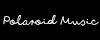
<style>
.page{position:relative;width:100px;height:40px;background:#000000}
.page>*{position:absolute;margin:0}
.t1{font:12px "foxinthesnow";color:#ffffff}
</style>
<div class="page">
<p class="t1" style="left:3px;top:15px;width:96px;height:11px">Polaroid Music</p>
</div>
